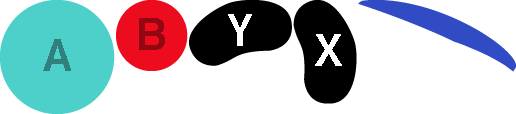
<style>
.page{position:relative;width:516px;height:114px;background:#ffffff}
.page>*{position:absolute;margin:0}
.t1{font:44px "Helvetica-Bold";color:#ffffff}
.t2{font:44px "Helvetica-Bold";color:#930713}
.t3{font:44px "Helvetica-Bold";color:#30817d}
</style>
<div class="page">
<p class="t1" style="left:228px;top:14px;width:24px;height:32px">Y</p>
<p class="t2" style="left:139px;top:18px;width:26px;height:32px">B</p>
<p class="t3" style="left:43px;top:39px;width:28px;height:32px">A</p>
<p class="t1" style="left:315px;top:34px;width:27px;height:32px">X</p>
</div>
